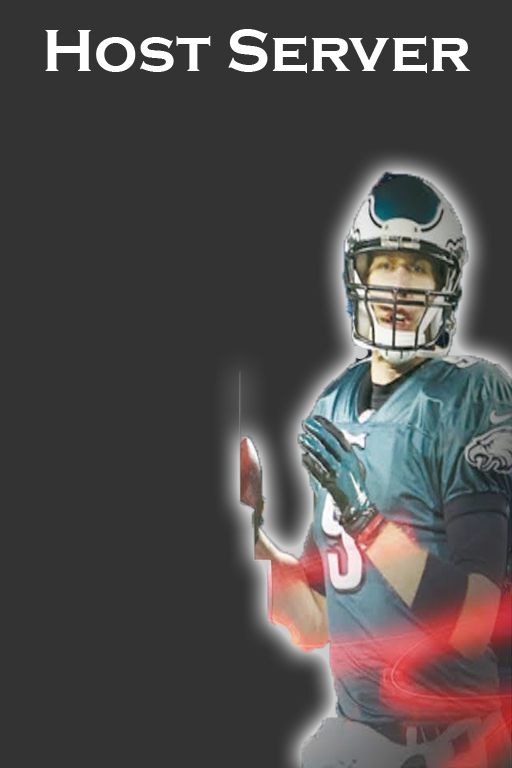
<style>
.page{position:relative;width:512px;height:768px;background:#333333}
.page>*{position:absolute;margin:0}
.t1{font:61px "CopperplateGothic-Bold";color:#ffffff}
</style>
<div class="page">
<p class="t1" style="left:45px;top:29px;width:425px;height:44px">Host Server</p>
</div>
